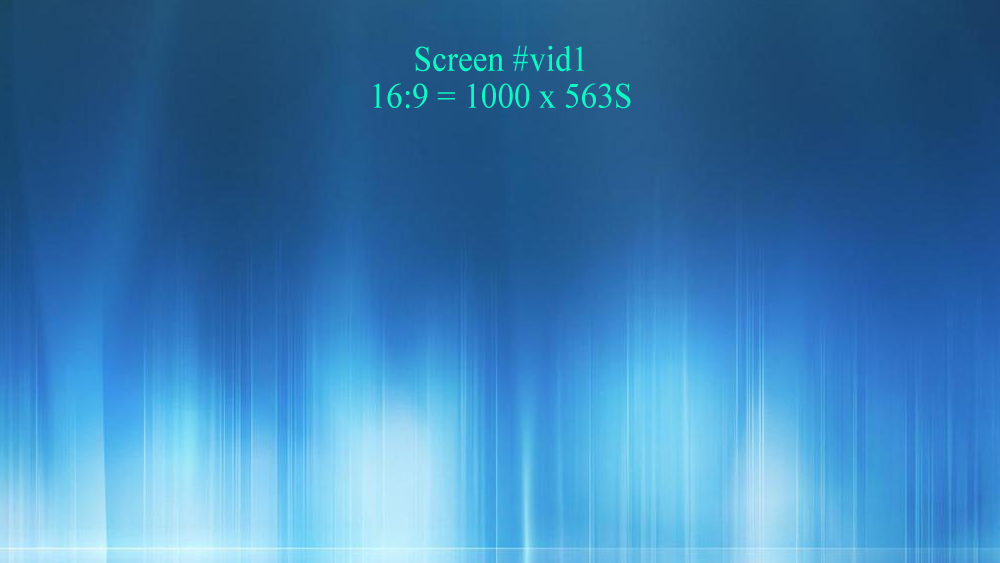
<style>
.page{position:relative;width:1000px;height:563px}
.page>*{position:absolute;margin:0}
.t1{font:36px/37.1px "TimesNewRomanPSMT";color:#0ef8c4;scale:0.93 1}
</style>
<div class="page">
<p class="t1" style="left:373px;top:45px;width:258px;height:64px;text-align:center">Screen #vid1<br>16:9 = 1000 x 563S</p>
</div>
